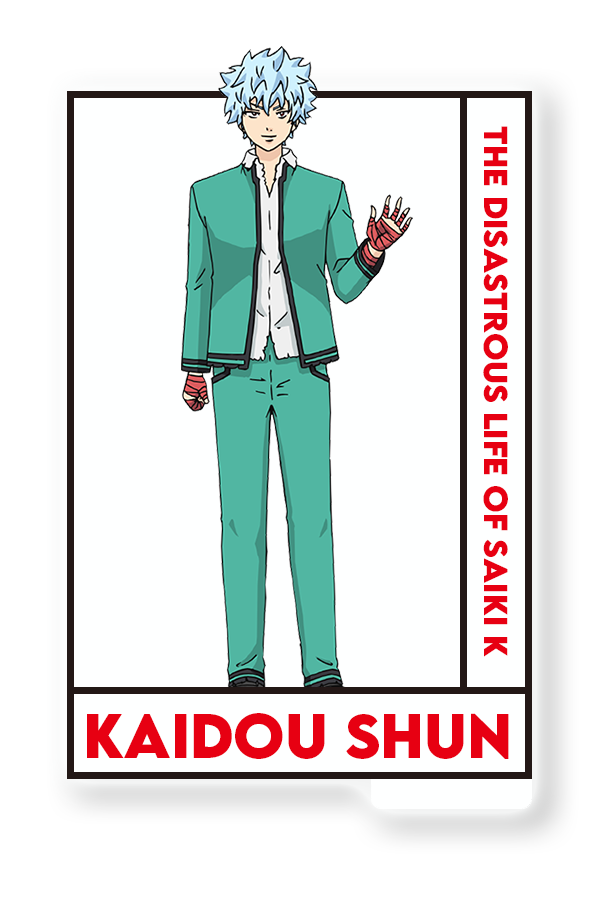
<style>
.page{position:relative;width:600px;height:900px;background:#feffff}
.page>*{position:absolute;margin:0}
.t1{font:29.6px "LEMONMILK-Bold";color:#e70012}
.t2{font:55.4px "LEMONMILK-Bold";color:#e70012}
</style>
<div class="page">
<p class="t1" style="left:483px;top:126px;width:25px;height:531px;rotate:90deg">THE disastrous Life of saiki K</p>
<p class="t2" style="left:87px;top:713px;width:422px;height:46px">Kaidou SHUN</p>
</div>
